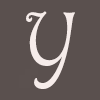
<style>
.page{position:relative;width:100px;height:100px;background:#5a504e}
.page>*{position:absolute;margin:0}
.t1{font:90px "Harrington";color:#f6ecea}
</style>
<div class="page">
<p class="t1" style="left:26px;top:11px;width:49px;height:78px">Y</p>
</div>
